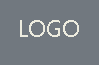
<style>
.page{position:relative;width:99px;height:65px;background:#71787f}
.page>*{position:absolute;margin:0}
.t1{font:24px "SegoeUISymbol";color:#edecdf}
</style>
<div class="page">
<p class="t1" style="left:20px;top:20px;width:59px;height:17px">LOGO</p>
</div>
